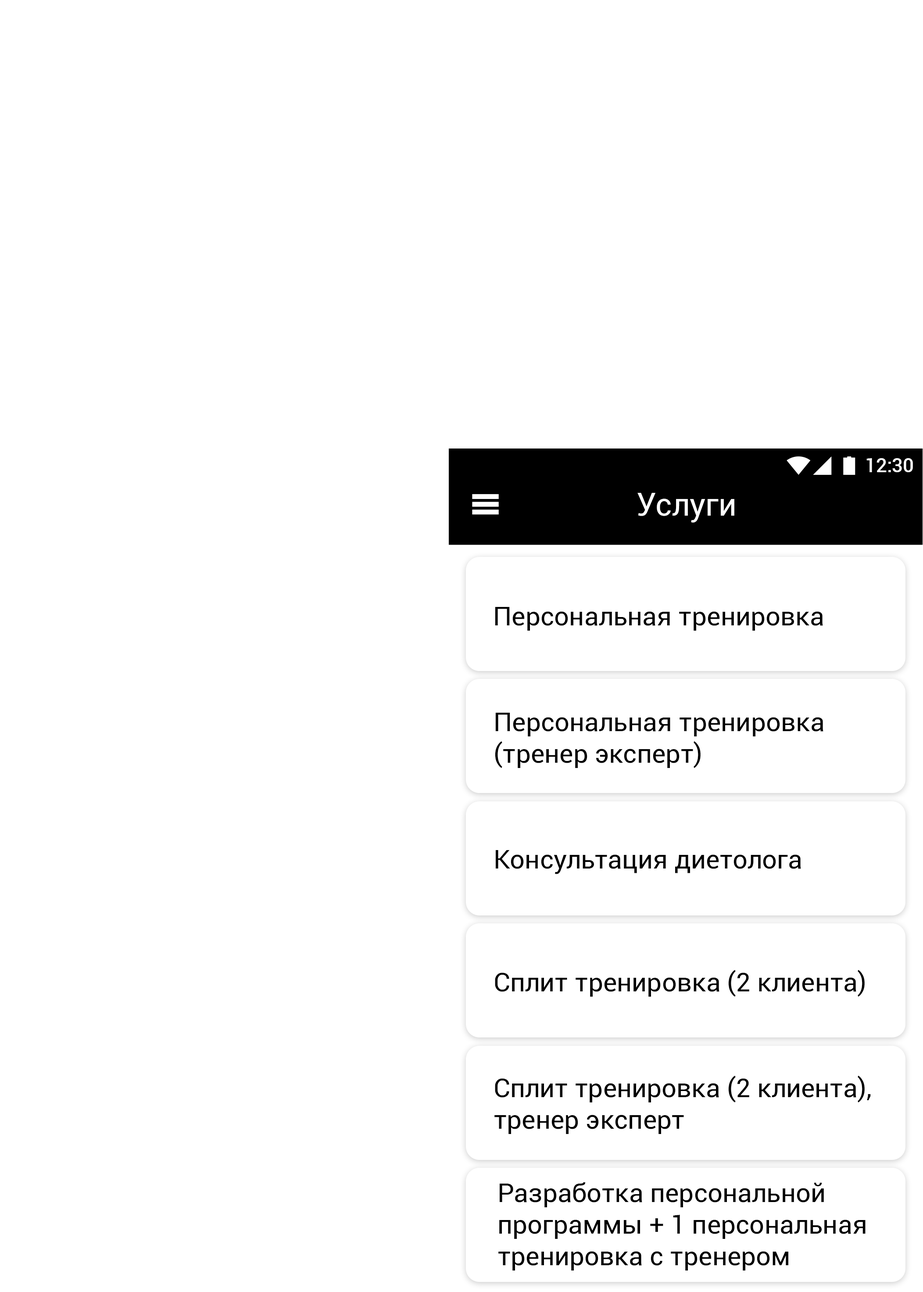
<style>
.page{position:relative;width:923px;height:1292px;background:#ffffff}
.page>*{position:absolute;margin:0}
.t1{font:19.3px "Roboto-Medium";color:#ffffff}
.t2{font:31.6px "Roboto-Regular";color:#ffffff}
.t3{font:26.3px "Roboto-Regular";color:#000000}
.t4{font:26.3px/31.6px "Roboto-Regular";color:#000000}
</style>
<div class="page">
<p class="t1" style="left:867px;top:458px;width:46px;height:14px">12:30</p>
<p class="t2" style="left:638px;top:493px;width:96px;height:30px">Услуги</p>
<p class="t3" style="left:495px;top:607px;width:328px;height:23px">Персональная тренировка</p>
<p class="t4" style="left:495px;top:713px;width:329px;height:55px">Персональная тренировка <br>(тренер эксперт)</p>
<p class="t3" style="left:496px;top:850px;width:305px;height:24px">Консультация диетолога</p>
<p class="t3" style="left:495px;top:970px;width:370px;height:26px">Сплит тренировка (2 клиента)</p>
<p class="t4" style="left:494px;top:1075px;width:377px;height:59px">Сплит тренировка (2 клиента), <br>тренер эксперт</p>
<p class="t4" style="left:498px;top:1182px;width:368px;height:88px">Разработка персональной <br>программы + 1 персональная<br>тренировка с тренером</p>
</div>
